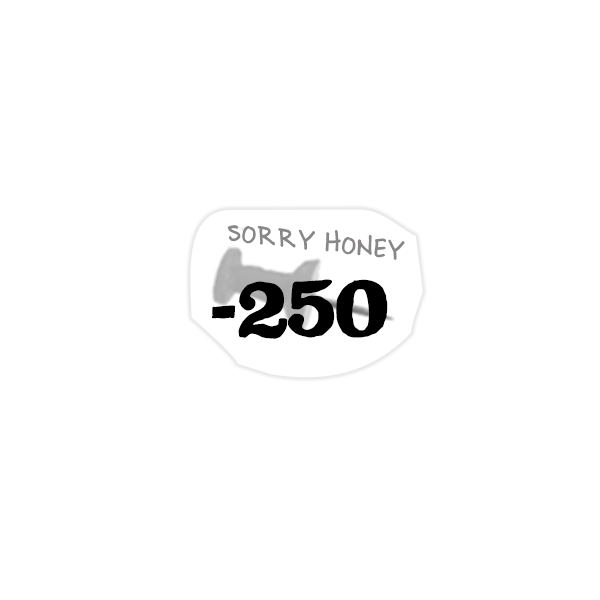
<style>
.page{position:relative;width:600px;height:600px;background:#ffffff}
.page>*{position:absolute;margin:0}
.t1{font:38.5px "BrownBagLunch";color:#888686}
.t2{font:79.6px "LSTKClarendonBold";color:#000000}
.t3{font:79.6px "LSTKClarendonBold";letter-spacing:0.01em;color:#000000}
</style>
<div class="page">
<p class="t1" style="left:227px;top:225px;width:178px;height:35px;rotate:6deg">SORRY HONEY</p>
<p class="t2" style="left:211px;top:279px;width:177px;height:60px">-<span class="t3">2</span>50</p>
</div>
